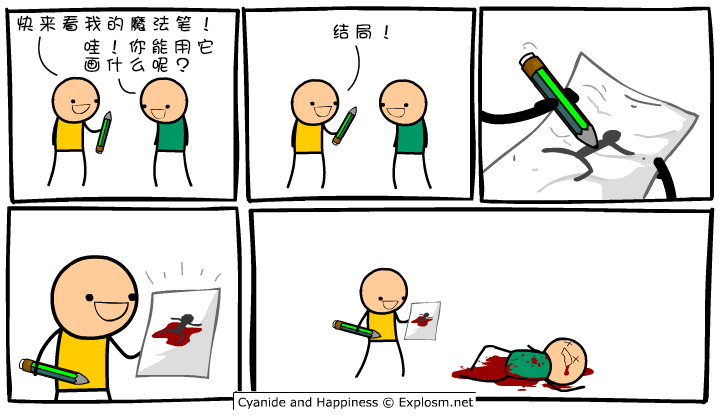
<style>
.page{position:relative;width:720px;height:420px;background:#ffffff}
.page>*{position:absolute;margin:0}
.t1{font:18px "DFGirl";letter-spacing:0.26em;color:#000000}
.t2{font:18px/18px "DFGirl";letter-spacing:0.26em;color:#000000}
</style>
<div class="page">
<p class="t1" style="left:17px;top:15px;width:192px;height:17px">快来看我的魔法笔！</p>
<p class="t1" style="left:333px;top:23px;width:56px;height:17px">结局！</p>
<p class="t2" style="left:84px;top:38px;width:129px;height:35px">哇！你能用它<br>画什么呢？</p>
</div>
